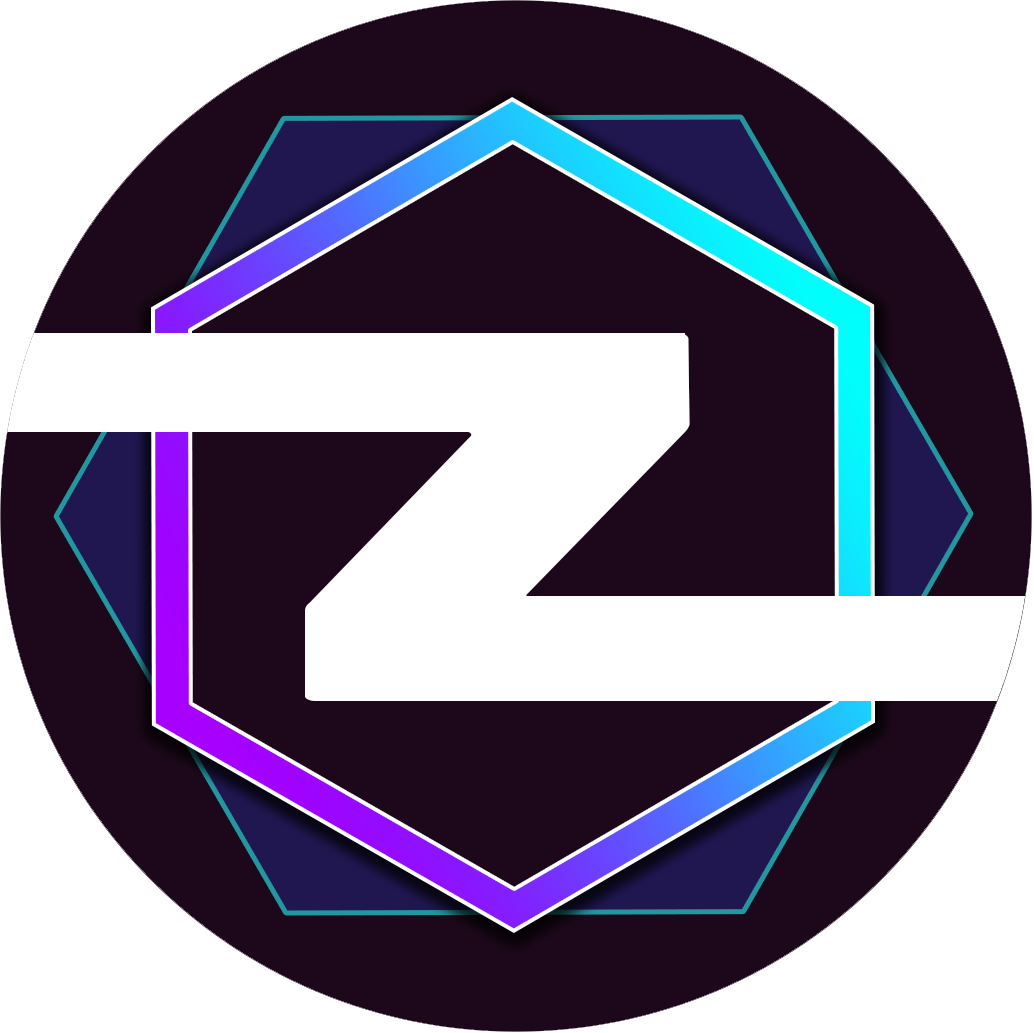
<style>
.page{position:relative;width:1034px;height:1033px;background:#1c081a}
.page>*{position:absolute;margin:0}
.t1{font:490.6px "PoplarStd";color:#ffffff;scale:2.34 1}
</style>
<div class="page">
<p class="t1" style="left:305px;top:333px;width:385px;height:368px">Z</p>
</div>
